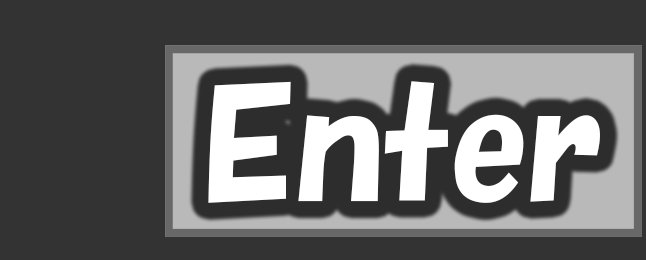
<style>
.page{position:relative;width:646px;height:260px;background:#333333}
.page>*{position:absolute;margin:0}
.t1{font:147.6px "HGPSoeiKakupoptai";color:#ffffff}
</style>
<div class="page">
<p class="t1" style="left:208px;top:81px;width:392px;height:122px">Enter</p>
</div>
